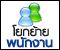
<style>
.page{position:relative;width:60px;height:50px;background:#ffffff}
.page>*{position:absolute;margin:0}
.t1{font:18px "PSLxKittithada-Bold";color:#202020}
.t2{font:18px "PSLxKittithada-Bold";color:#0b3b92;font-weight:bold}
</style>
<div class="page">
<p class="t1" style="left:12px;top:24px;width:37px;height:13px">โยกย้าย</p>
<p class="t2" style="left:6px;top:37px;width:47px;height:11px">พนักงาน</p>
</div>
